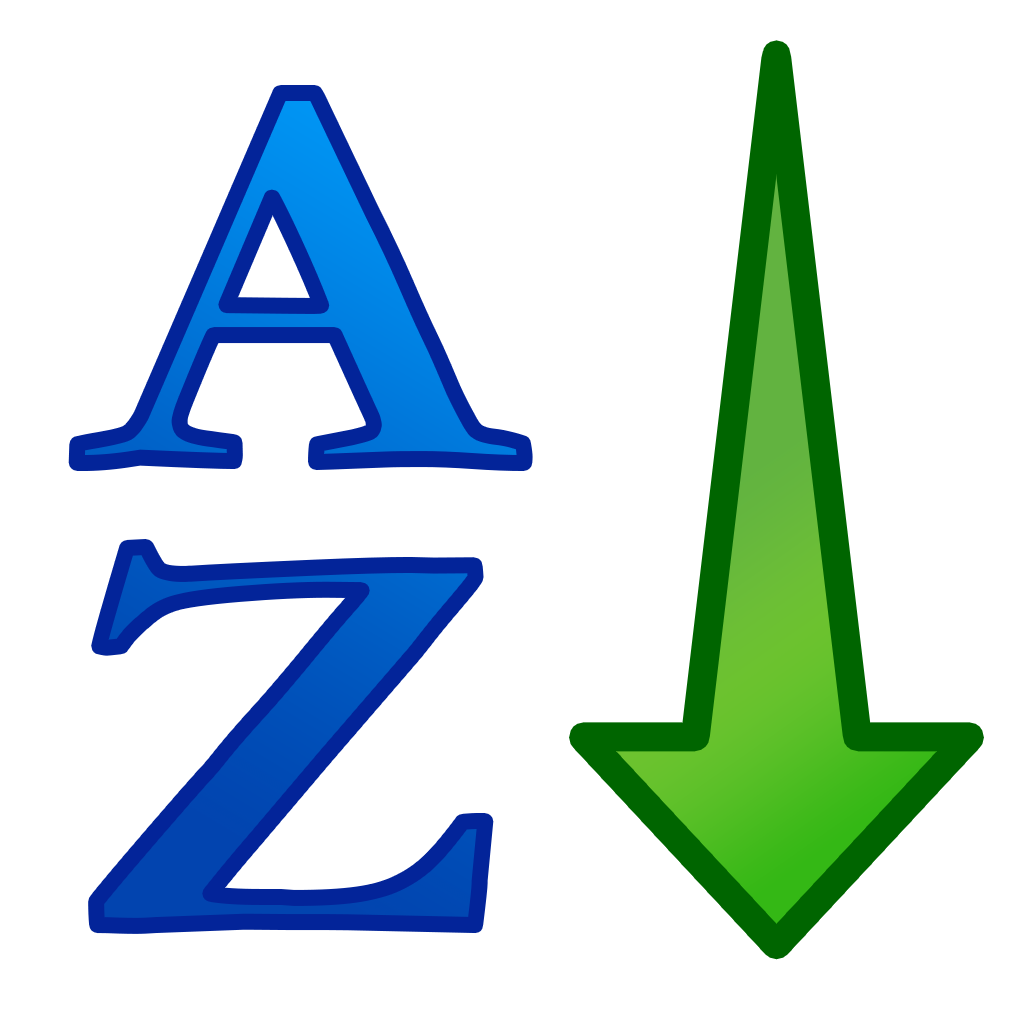
<style>
.page{position:relative;width:1024px;height:1024px;background:#ffffff}
.page>*{position:absolute;margin:0}
.t1{font:575px "Garamond-Bold";letter-spacing:-0.025em;scale:1.13 1}
</style>
<div class="page">
<p class="t1" style="left:76px;top:93px;width:449px;height:370px">A</p>
<p class="t1" style="left:96px;top:547px;width:390px;height:379px">Z</p>
</div>
